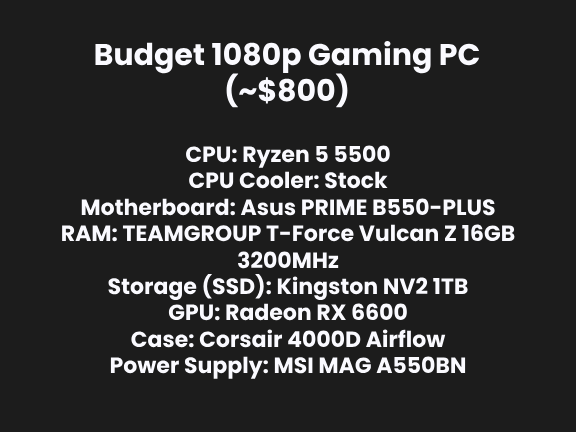
<style>
.page{position:relative;width:576px;height:432px;background:#1c1c1c}
.page>*{position:absolute;margin:0}
.t1{font:30px "Poppins-Bold";color:#fafaff}
.t2{font:22px "Poppins-Bold";color:#fafaff}
</style>
<div class="page">
<p class="t1" style="left:95px;top:40px;width:385px;height:68px;text-align:center">Budget 1080p Gaming PC<br>(~$800)</p>
<p class="t2" style="left:62px;top:145px;width:453px;height:234px;text-align:center">CPU: Ryzen 5 5500<br>CPU Cooler: Stock<br>Motherboard: Asus PRIME B550-PLUS<br>RAM: TEAMGROUP T-Force Vulcan Z 16GB<br>3200MHz<br>Storage (SSD): Kingston NV2 1TB<br>GPU: Radeon RX 6600<br>Case: Corsair 4000D Airflow<br>Power Supply: MSI MAG A550BN</p>
</div>
